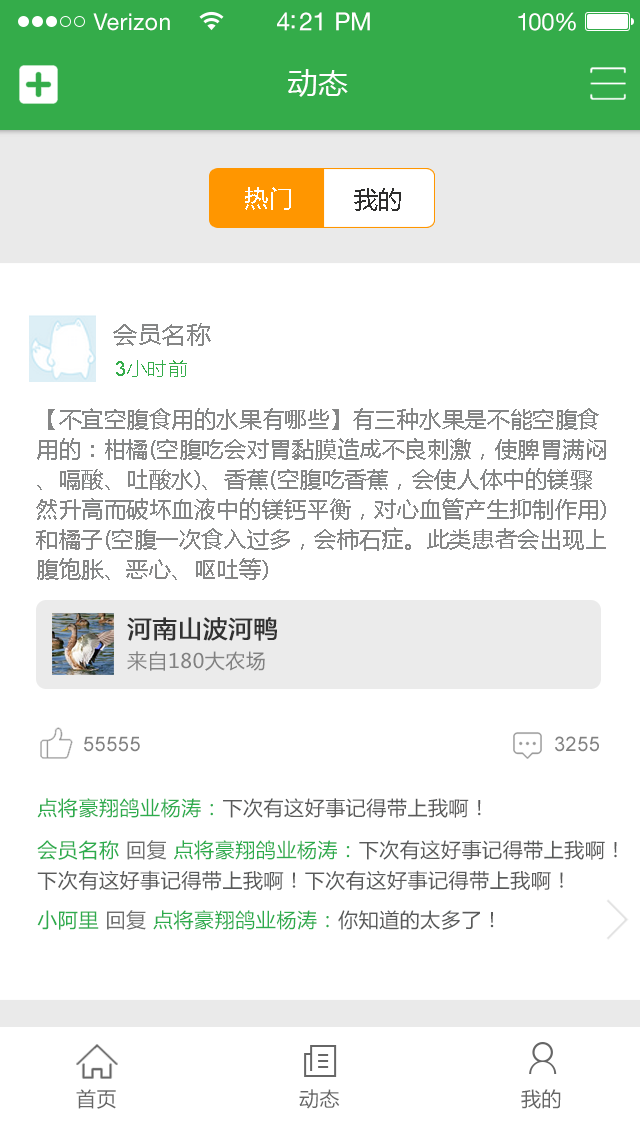
<style>
.page{position:relative;width:640px;height:1131px;background:#ffffff}
.page>*{position:absolute;margin:0}
.t1{font:23px "HelveticaNeueLTStd-Roman";letter-spacing:0.02em;color:#ffffff}
.t2{font:25px "HelveticaNeueLTStd-Roman";letter-spacing:-0.02em;color:#ffffff}
.t3{font:24px "HelveticaNeueLTStd-Roman";letter-spacing:-0.02em;color:#ffffff}
.t4{font:30px "MicrosoftYaHei";letter-spacing:0.025em;color:#ffffff}
.t5{font:24px "MicrosoftYaHei";letter-spacing:0.025em;color:#ffffff}
.t6{font:24px "MicrosoftYaHei";letter-spacing:0.025em;color:#2e2e2d}
.t7{font:24px "MicrosoftYaHei";letter-spacing:0.025em;color:#858686}
.t8{font:20px "MicrosoftYaHei";letter-spacing:0.025em;color:#34ac4a}
.t9{font:20px "ArialMT";letter-spacing:0.025em;color:#34ac4a}
.t10{font:22px/30px "MicrosoftYaHei";letter-spacing:0.025em;color:#858686}
.t11{font:24px "MicrosoftYaHei";letter-spacing:0.025em;color:#323232;font-weight:bold}
.t12{font:20px "MicrosoftYaHei";letter-spacing:0.025em;color:#818181}
.t13{font:20px "ArialMT";letter-spacing:0.025em;color:#818181}
.t14{font:20px "MicrosoftYaHei";letter-spacing:0.025em;color:#595a5a}
.t15{font:20px "MicrosoftYaHei";letter-spacing:0.025em;color:#2dac4d}
.t16{font:20px/30.4px "MicrosoftYaHei";letter-spacing:0.025em;color:#595a5a}
.t17{font:20px/30.4px "MicrosoftYaHei";letter-spacing:0.025em;color:#2dac4d}
.t18{font:20px/30.4px "MicrosoftYaHei";letter-spacing:0.025em;color:#6f6f6f}
.t19{font:20px "MicrosoftYaHei";letter-spacing:0.025em;color:#6f6f6f}
.t20{font:20px "MicrosoftYaHei";letter-spacing:0.025em;color:#666666}
</style>
<div class="page">
<p class="t1" style="left:93px;top:13px;width:77px;height:18px">Verizon</p>
<p class="t2" style="left:277px;top:12px;width:93px;height:19px">4:21 PM</p>
<p class="t3" style="left:518px;top:12px;width:58px;height:19px">100%</p>
<p class="t4" style="left:288px;top:69px;width:60px;height:28px">动态</p>
<p class="t5" style="left:245px;top:187px;width:46px;height:23px">热门</p>
<p class="t6" style="left:354px;top:188px;width:47px;height:23px">我的</p>
<p class="t7" style="left:113px;top:323px;width:98px;height:23px">会员名称</p>
<p class="t8" style="left:116px;top:360px;width:71px;height:17px"><span class="t9">3</span>小时前</p>
<p class="t10" style="left:36px;top:408px;width:570px;height:172px">【不宜空腹食用的水果有哪些】有三种水果是不能空腹食用的：柑橘(空腹吃会对胃黏膜造成不良刺激，使脾胃满闷、嗝酸、吐酸水)、香蕉(空腹吃香蕉，会使人体中的镁骤然升高而破坏血液中的镁钙平衡，对心血管产生抑制作用)和橘子(空腹一次食入过多，会柿石症。此类患者会出现上腹饱胀、恶心、呕吐等)</p>
<p class="t11" style="left:127px;top:617px;width:150px;height:24px">河南山波河鸭</p>
<p class="t12" style="left:127px;top:651px;width:138px;height:20px">来自180大农场</p>
<p class="t13" style="left:84px;top:736px;width:56px;height:16px">55555</p>
<p class="t13" style="left:555px;top:736px;width:44px;height:16px">3255</p>
<p class="t14" style="left:37px;top:798px;width:444px;height:20px"><span class="t15">点将豪翔鸽业杨涛：</span>下次有这好事记得带上我啊！</p>
<p class="t16" style="left:37px;top:840px;width:580px;height:51px"><span class="t17">会员名称 </span><span class="t18">回复</span><span class="t17"> 点将豪翔鸽业杨涛：</span>下次有这好事记得带上我啊！<br>下次有这好事记得带上我啊！下次有这好事记得带上我啊！</p>
<p class="t15" style="left:37px;top:910px;width:457px;height:20px">小阿里 <span class="t19">回复</span> 点将豪翔鸽业杨涛：<span class="t14">你知道的太多了！</span></p>
<p class="t20" style="left:76px;top:1089px;width:40px;height:20px">首页</p>
<p class="t20" style="left:299px;top:1089px;width:41px;height:20px">动态</p>
<p class="t20" style="left:521px;top:1089px;width:40px;height:20px">我的</p>
</div>
